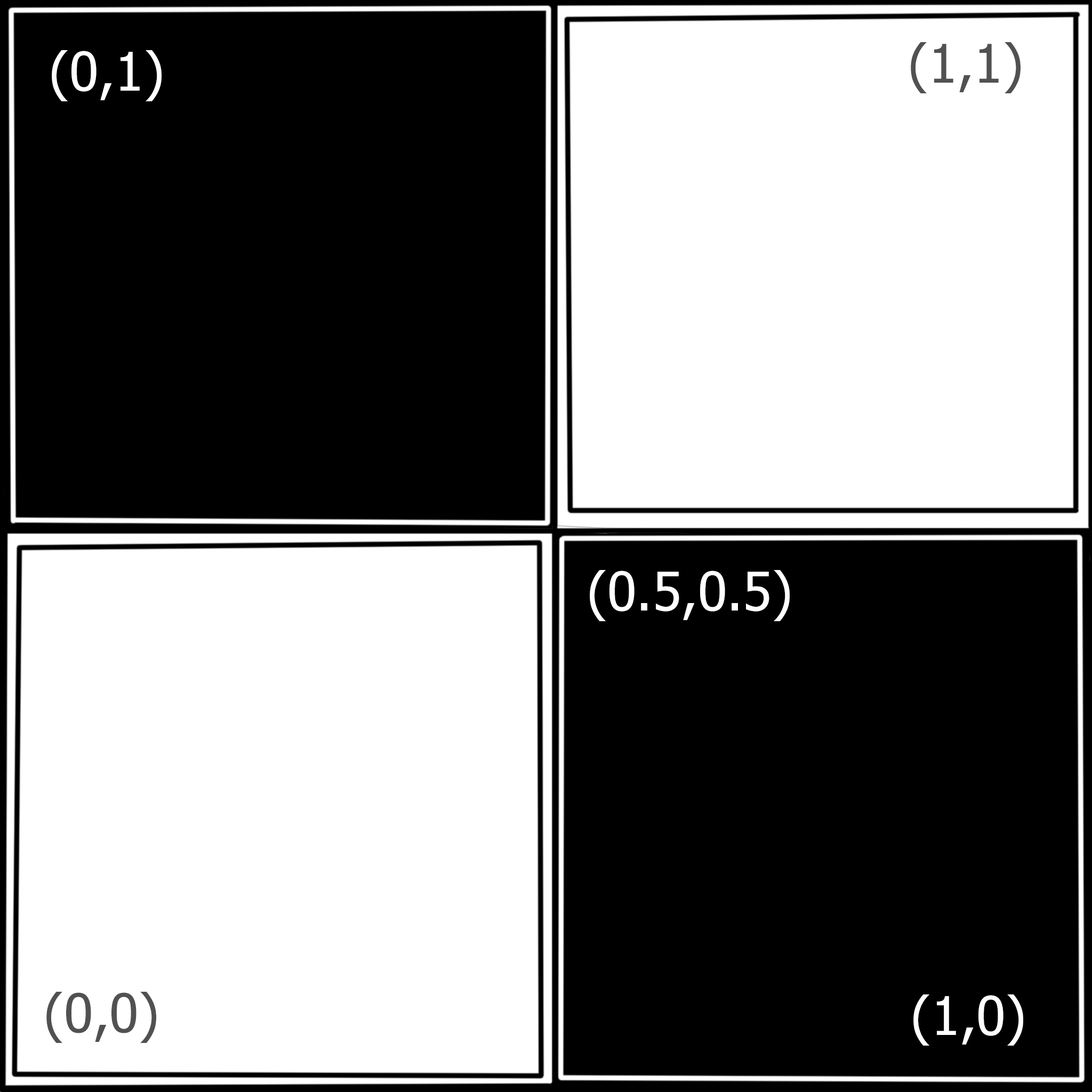
<style>
.page{position:relative;width:1092px;height:1092px;background:#ffffff}
.page>*{position:absolute;margin:0}
.t1{font:53.3px "Tahoma";color:#ffffff}
.t2{font:53.3px "Tahoma";color:#515151}
</style>
<div class="page">
<p class="t1" style="left:52px;top:50px;width:110px;height:51px">(0,1)</p>
<p class="t2" style="left:911px;top:42px;width:110px;height:51px">(1,1)</p>
<p class="t1" style="left:590px;top:570px;width:200px;height:51px">(0.5,0.5)</p>
<p class="t2" style="left:46px;top:992px;width:110px;height:51px">(0,0)</p>
<p class="t1" style="left:913px;top:994px;width:110px;height:52px">(1,0)</p>
</div>
